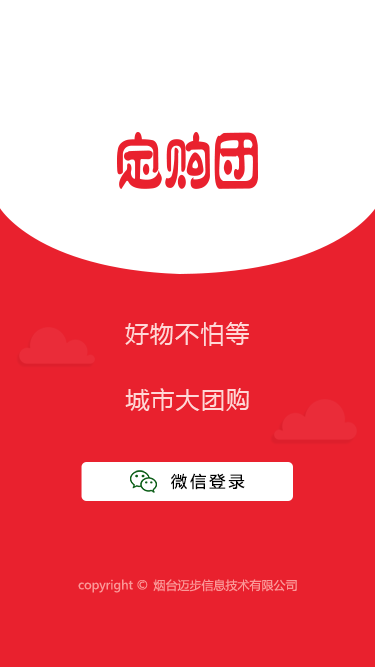
<style>
.page{position:relative;width:375px;height:667px;background:#e9212e}
.page>*{position:absolute;margin:0}
.t1{font:24px "MicrosoftYaHei";letter-spacing:0.05em;color:#ffd7d7}
.t2{font:16px "MicrosoftYaHei";letter-spacing:0.2em;color:#000000}
.t3{font:12px "MicrosoftYaHei";color:#fb9898}
</style>
<div class="page">
<p class="t1" style="left:125px;top:322px;width:124px;height:24px">好物不怕等</p>
<p class="t1" style="left:125px;top:388px;width:124px;height:23px">城市大团购</p>
<p class="t2" style="left:171px;top:473px;width:74px;height:17px">微信登录</p>
<p class="t3" style="left:78px;top:579px;width:70px;height:14px">copyright ©</p>
<p class="t3" style="left:153px;top:579px;width:144px;height:13px">烟台迈步信息技术有限公司</p>
</div>
